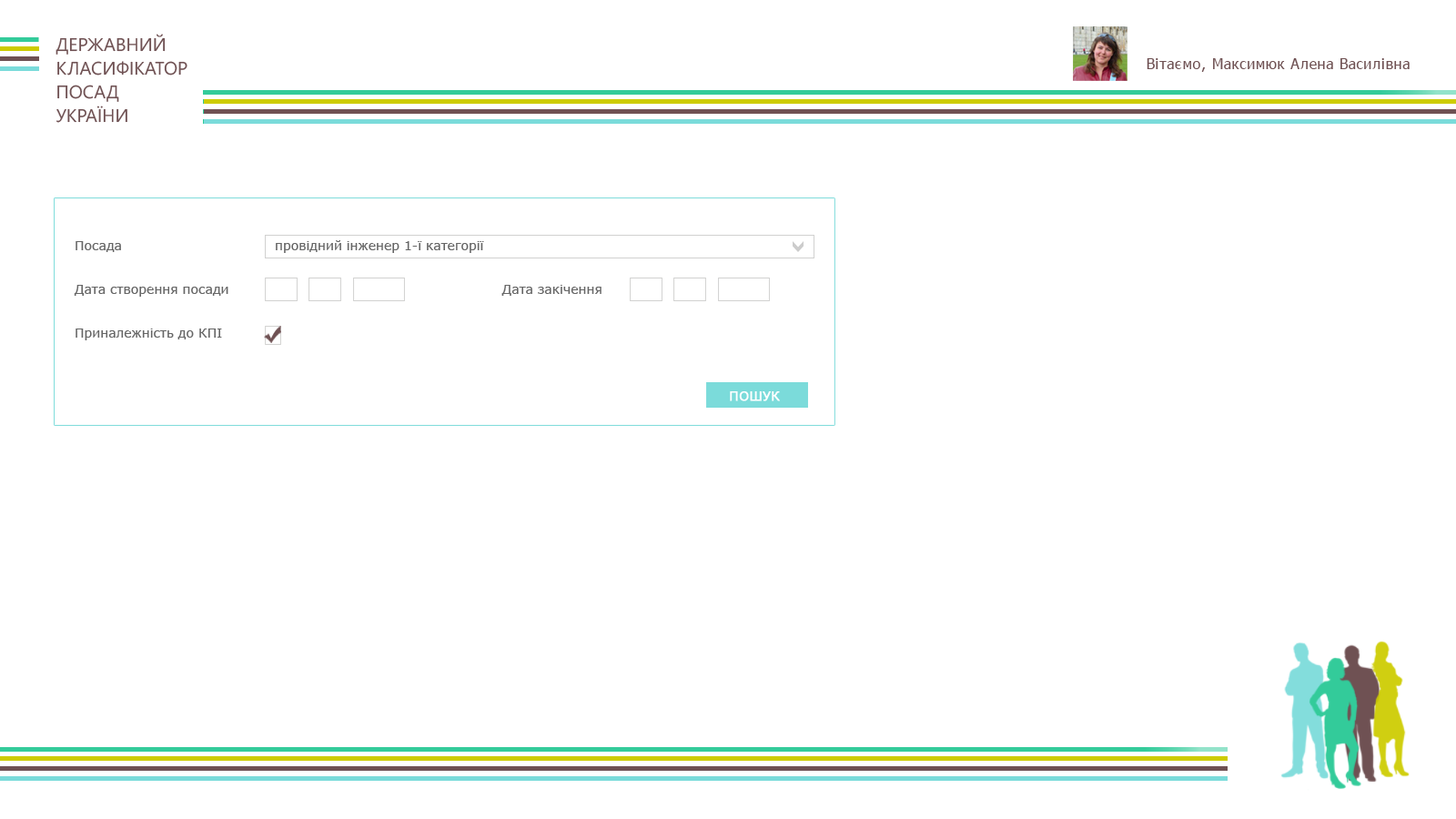
<style>
.page{position:relative;width:1456px;height:819px;background:#ffffff}
.page>*{position:absolute;margin:0}
.t1{font:18.2px/23.7px "SegoeWP";color:#6f5153;text-transform:uppercase}
.t2{font:14.6px "Tahoma";letter-spacing:0.05em;color:#6f5153}
.t3{font:12.7px/43.7px "Verdana";color:#666666}
.t4{font:12.7px "Verdana";color:#666666}
.t5{font:12.7px "Verdana";color:#ffffff;text-transform:uppercase;font-weight:bold}
</style>
<div class="page">
<p class="t1" style="left:56px;top:34px;width:131px;height:89px">Державний<br>класифікатор<br>посад<br>України</p>
<p class="t2" style="left:1147px;top:58px;width:263px;height:14px">Вітаємо, Максимюк Алена Василівна</p>
<p class="t3" style="left:74px;top:241px;width:528px;height:99px">Посада<br>Дата створення посади                                                             Дата закічення<br>Приналежність до КПІ</p>
<p class="t4" style="left:276px;top:240px;width:208px;height:13px">провідний інженер 1-ї категорії</p>
<p class="t5" style="left:730px;top:391px;width:50px;height:10px">Пошук</p>
</div>
